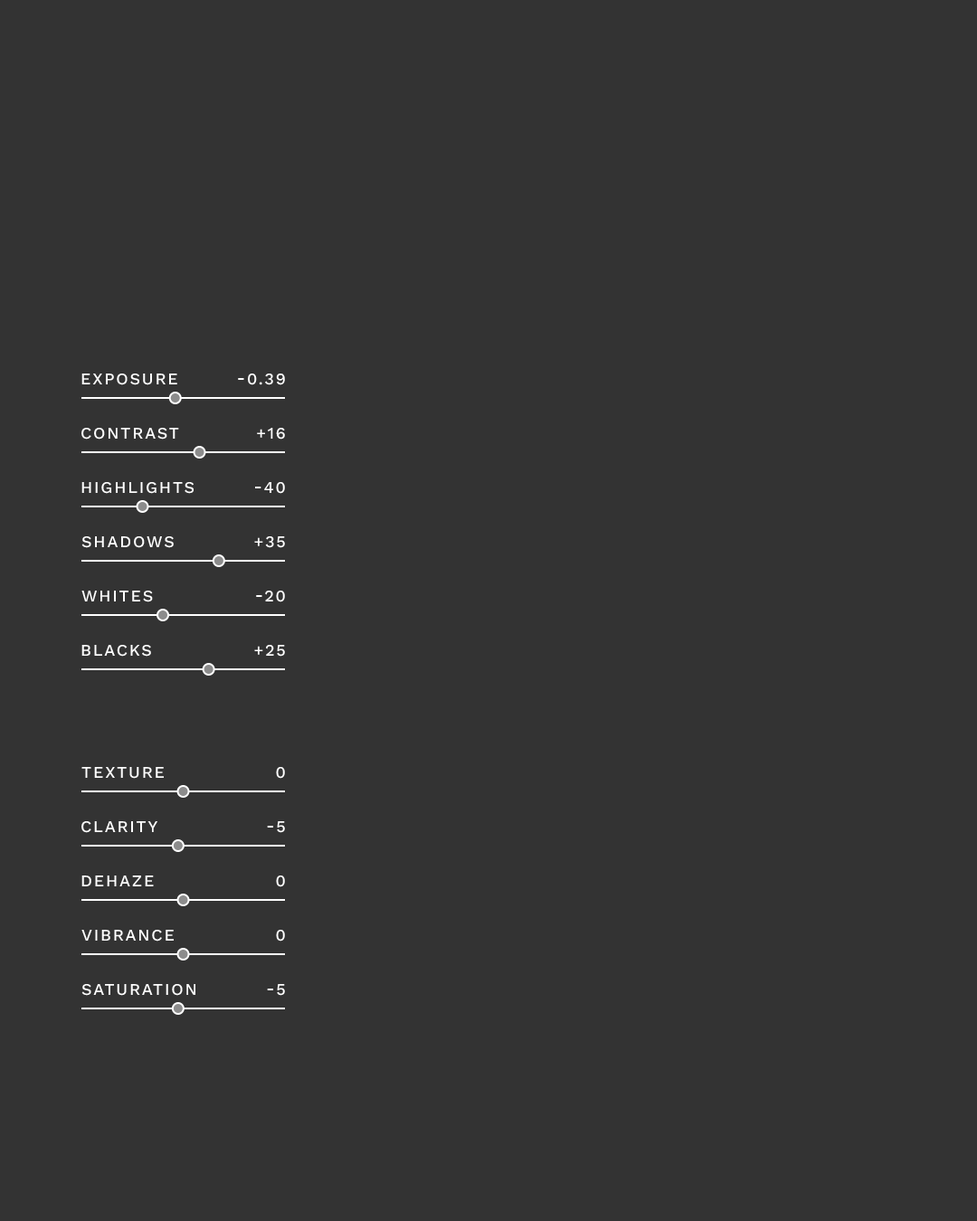
<style>
.page{position:relative;width:977px;height:1221px;background:#333333}
.page>*{position:absolute;margin:0}
.t1{font:16.3px "WorkSansRoman-Medium";letter-spacing:0.1em;color:#ffffff;text-transform:uppercase}
</style>
<div class="page">
<p class="t1" style="left:81px;top:373px;width:96px;height:12px">Exposure</p>
<p class="t1" style="left:238px;top:373px;width:47px;height:12px">-0.39</p>
<p class="t1" style="left:81px;top:428px;width:98px;height:12px">Contrast</p>
<p class="t1" style="left:257px;top:428px;width:28px;height:12px">+16</p>
<p class="t1" style="left:81px;top:482px;width:113px;height:12px">Highlights</p>
<p class="t1" style="left:255px;top:482px;width:30px;height:12px">-40</p>
<p class="t1" style="left:81px;top:536px;width:93px;height:12px">Shadows</p>
<p class="t1" style="left:254px;top:536px;width:31px;height:12px">+35</p>
<p class="t1" style="left:81px;top:591px;width:72px;height:11px">Whites</p>
<p class="t1" style="left:256px;top:591px;width:29px;height:11px">-20</p>
<p class="t1" style="left:81px;top:645px;width:70px;height:12px">Blacks</p>
<p class="t1" style="left:254px;top:645px;width:31px;height:12px">+25</p>
<p class="t1" style="left:81px;top:767px;width:83px;height:12px">Texture</p>
<p class="t1" style="left:276px;top:767px;width:9px;height:12px">0</p>
<p class="t1" style="left:81px;top:821px;width:76px;height:12px">Clarity</p>
<p class="t1" style="left:267px;top:821px;width:18px;height:12px">-5</p>
<p class="t1" style="left:81px;top:875px;width:73px;height:11px">Dehaze</p>
<p class="t1" style="left:276px;top:875px;width:9px;height:12px">0</p>
<p class="t1" style="left:81px;top:930px;width:93px;height:11px">Vibrance</p>
<p class="t1" style="left:276px;top:930px;width:9px;height:11px">0</p>
<p class="t1" style="left:81px;top:984px;width:114px;height:12px">Saturation</p>
<p class="t1" style="left:267px;top:984px;width:18px;height:12px">-5</p>
</div>
